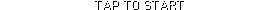
<style>
.page{position:relative;width:279px;height:10px;background:#ffffff}
.page>*{position:absolute;margin:0}
.t1{font:12px "Geneva";color:#000000}
</style>
<div class="page">
<p class="t1" style="left:95px;top:1px;width:89px;height:9px">TAP TO START</p>
</div>
